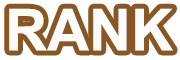
<style>
.page{position:relative;width:180px;height:60px;background:#875826}
.page>*{position:absolute;margin:0}
.t1{font:58px "Arial-BoldMT";color:#ffffff}
</style>
<div class="page">
<p class="t1" style="left:9px;top:8px;width:164px;height:43px">RANK</p>
</div>
